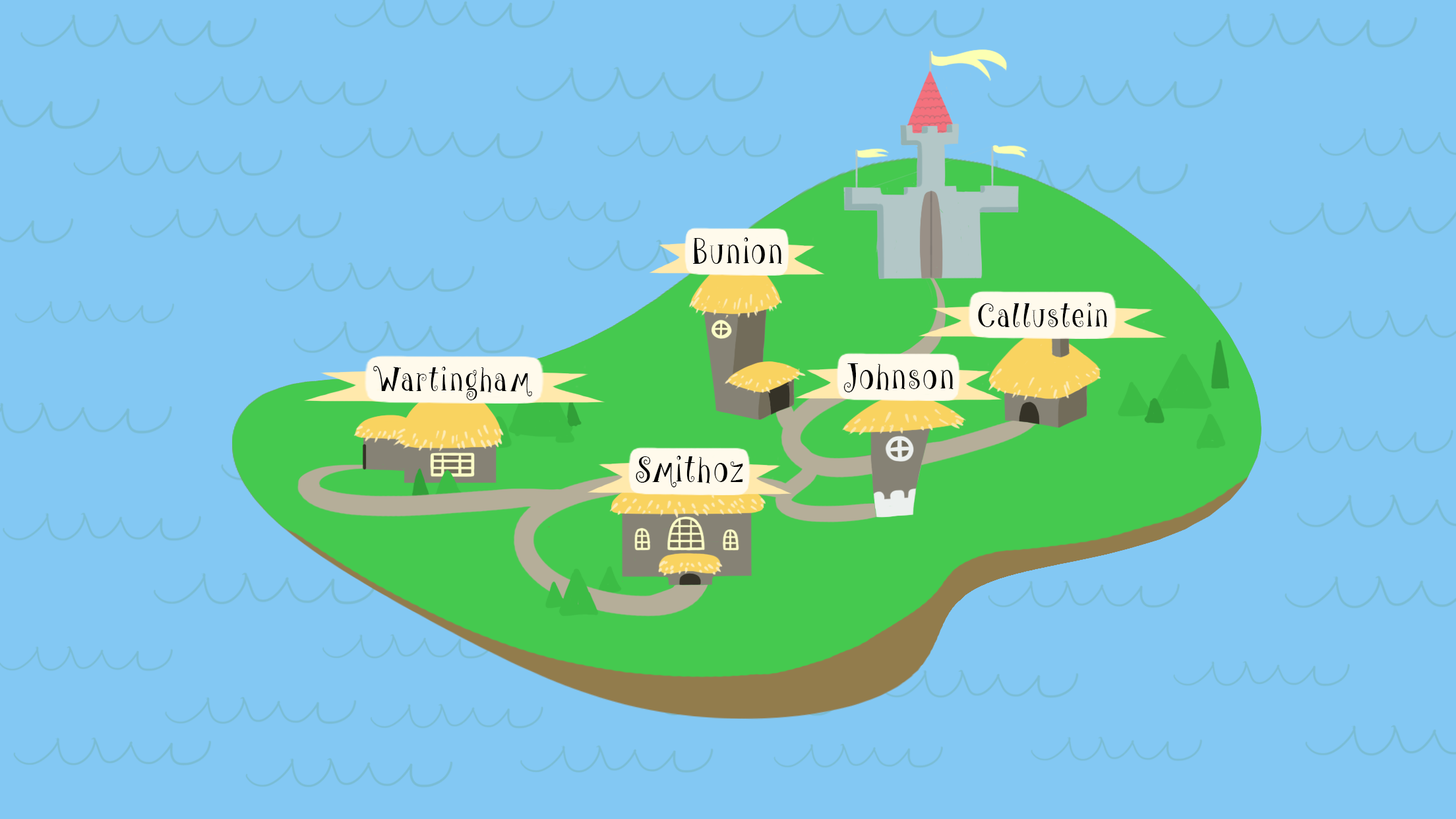
<style>
.page{position:relative;width:1456px;height:819px;background:#83c8f3}
.page>*{position:absolute;margin:0}
.t1{font:35.7px "give_me_some_sugar";letter-spacing:0.1em;color:#000000;scale:0.9 1}
.t2{font:33px "give_me_some_sugar";letter-spacing:0.1em;color:#000000;scale:0.9 1}
</style>
<div class="page">
<p class="t1" style="left:693px;top:237px;width:89px;height:27px">Bunion</p>
<p class="t2" style="left:978px;top:303px;width:129px;height:24px">Callustein</p>
<p class="t2" style="left:373px;top:366px;width:159px;height:34px">Wartingham</p>
<p class="t1" style="left:843px;top:363px;width:111px;height:29px">Johnson</p>
<p class="t1" style="left:636px;top:456px;width:107px;height:31px">Smithoz</p>
</div>
